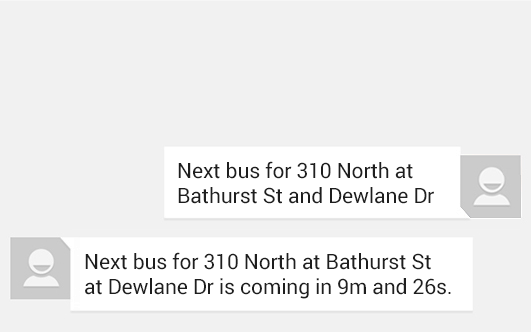
<style>
.page{position:relative;width:531px;height:332px;background:#f1f1f1}
.page>*{position:absolute;margin:0}
.t1{font:21px "Roboto-Regular";letter-spacing:-0.005em;color:#1e1e1e}
</style>
<div class="page">
<p class="t1" style="left:178px;top:161px;width:256px;height:43px">Next bus for 310 North at Bathurst St and Dewlane Dr</p>
<p class="t1" style="left:85px;top:252px;width:366px;height:47px">Next bus for 310 North at Bathurst St at Dewlane Dr is coming in 9m and 26s.</p>
</div>
